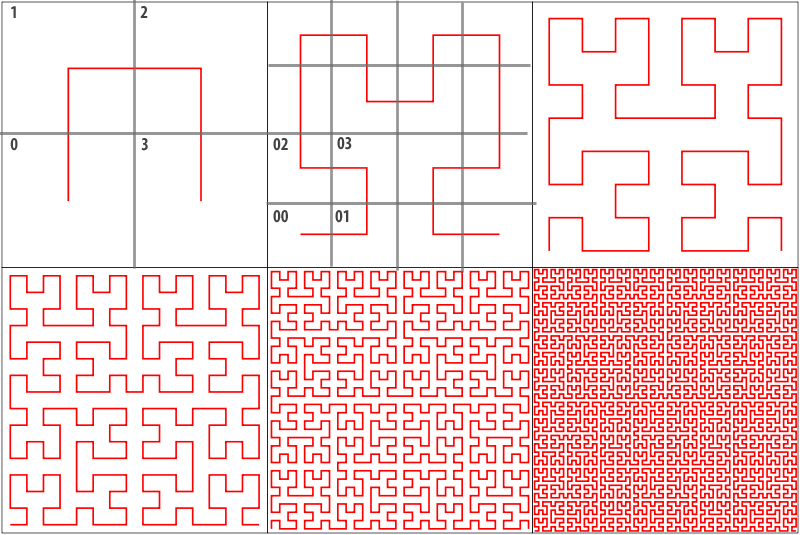
<style>
.page{position:relative;width:800px;height:535px;background:#ffffff}
.page>*{position:absolute;margin:0}
.t1{font:18px "MyriadPro-BoldCond";color:#424242}
</style>
<div class="page">
<p class="t1" style="left:11px;top:6px;width:5px;height:12px">1</p>
<p class="t1" style="left:140px;top:6px;width:8px;height:12px">2</p>
<p class="t1" style="left:337px;top:137px;width:15px;height:13px">03</p>
<p class="t1" style="left:10px;top:138px;width:8px;height:13px">0</p>
<p class="t1" style="left:141px;top:138px;width:7px;height:13px">3</p>
<p class="t1" style="left:273px;top:138px;width:15px;height:13px">02</p>
<p class="t1" style="left:273px;top:210px;width:15px;height:13px">00</p>
<p class="t1" style="left:335px;top:210px;width:14px;height:13px">01</p>
</div>
